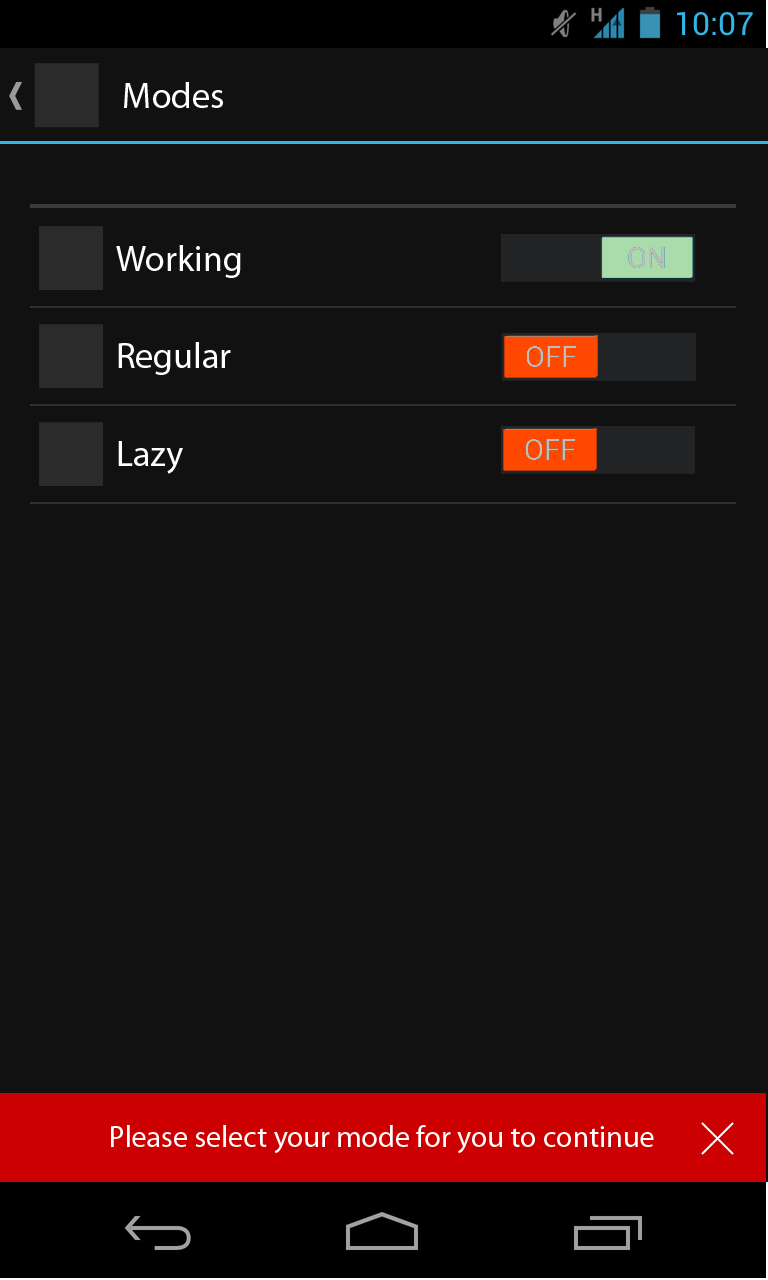
<style>
.page{position:relative;width:768px;height:1280px;background:#111111}
.page>*{position:absolute;margin:0}
.t1{font:36px "MyriadPro-Regular";color:#ffffff}
.t2{font:30px "MyriadPro-Regular";color:#ffffff}
</style>
<div class="page">
<p class="t1" style="left:124px;top:82px;width:99px;height:26px">Modes</p>
<p class="t1" style="left:116px;top:245px;width:125px;height:33px">Working</p>
<p class="t1" style="left:118px;top:342px;width:113px;height:33px">Regular</p>
<p class="t1" style="left:118px;top:441px;width:65px;height:33px">Lazy</p>
<p class="t2" style="left:111px;top:1125px;width:543px;height:29px">Please select your mode for you to continue</p>
</div>
